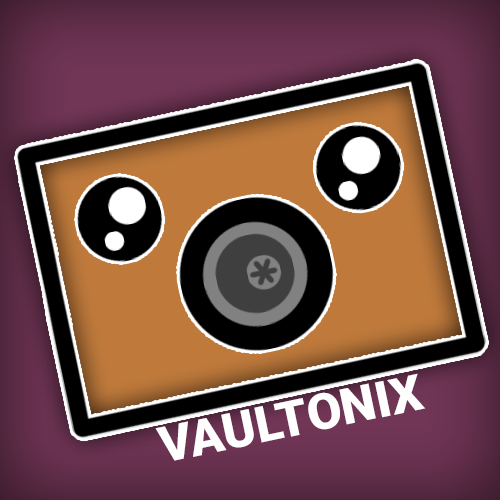
<style>
.page{position:relative;width:500px;height:500px}
.page>*{position:absolute;margin:0}
.t1{font:50px "Roboto-Black";color:#ffffff}
</style>
<div class="page">
<p class="t1" style="left:155px;top:373px;width:271px;height:88px;rotate:-12deg">VAULTONIX</p>
</div>
